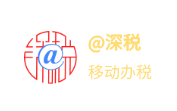
<style>
.page{position:relative;width:177px;height:111px;background:#ffffff}
.page>*{position:absolute;margin:0}
.t1{font:18px "SourceHanSansSC-Regular";color:#ffdb70}
.t2{font:16px "SourceHanSansSC-Regular";color:#ffdb70}
</style>
<div class="page">
<p class="t1" style="left:88px;top:32px;width:54px;height:22px">@深税</p>
<p class="t2" style="left:88px;top:64px;width:64px;height:16px">移动办税</p>
</div>
